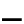
<style>
.page{position:relative;width:24px;height:24px;background:#ffffff}
.page>*{position:absolute;margin:0}
.t1{font:27px "Verdana-Bold";color:#000000}
</style>
<div class="page">
<p class="t1" style="left:2px;top:18px;width:20px;height:3px">_</p>
</div>
